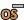
<style>
.page{position:relative;width:24px;height:20px;background:#ffffff}
.page>*{position:absolute;margin:0}
.t1{font:14px "Calibri-Bold";color:#db9456}
</style>
<div class="page">
<p class="t1" style="left:1px;top:9px;width:16px;height:10px">OS</p>
</div>
